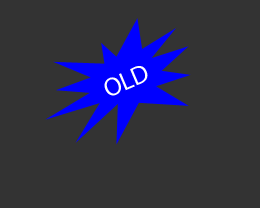
<style>
.page{position:relative;width:260px;height:208px;background:#333333}
.page>*{position:absolute;margin:0}
.t1{font:26px "MyriadPro-Regular";color:#ffffff}
</style>
<div class="page">
<p class="t1" style="left:104px;top:66px;width:44px;height:30px;rotate:-23deg">OLD</p>
</div>
